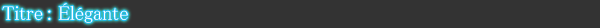
<style>
.page{position:relative;width:600px;height:28px;background:#333333}
.page>*{position:absolute;margin:0}
.t1{font:20px "MS-PMincho";color:#ffffff}
</style>
<div class="page">
<p class="t1" style="left:2px;top:3px;width:126px;height:20px">Titre : Élégante</p>
</div>
